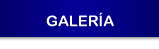
<style>
.page{position:relative;width:159px;height:49px}
.page>*{position:absolute;margin:0}
.t1{font:15px "ArialRoundedMTBold";color:#ffffff}
</style>
<div class="page">
<p class="t1" style="left:46px;top:12px;width:68px;height:15px">GALERÍA</p>
</div>
